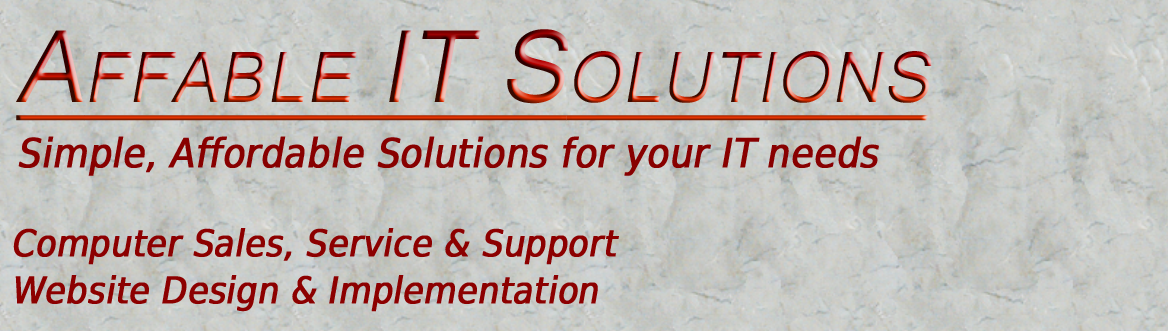
<style>
.page{position:relative;width:1168px;height:331px}
.page>*{position:absolute;margin:0}
.t1{font:40px "DejaVuSansCondensed";letter-spacing:-0.01em;color:#8c0000;font-weight:bold;font-style:italic}
.t2{font:36.7px/46.7px "DejaVuSansCondensed";letter-spacing:-0.01em;color:#8c0000;font-weight:bold;font-style:italic}
</style>
<div class="page">
<p class="t1" style="left:18px;top:136px;width:861px;height:40px">Simple, Affordable Solutions for your IT needs</p>
<p class="t2" style="left:13px;top:228px;width:606px;height:84px">Computer Sales, Service &amp; Support <br>Website Design &amp; Implementation</p>
</div>
